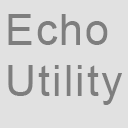
<style>
.page{position:relative;width:128px;height:128px;background:#e1e1e1}
.page>*{position:absolute;margin:0}
.t1{font:42.5px "ArialMT";letter-spacing:0.049em;color:#7e7e7e}
</style>
<div class="page">
<p class="t1" style="left:8px;top:14px;width:114px;height:91px">Echo<br>Utility</p>
</div>
